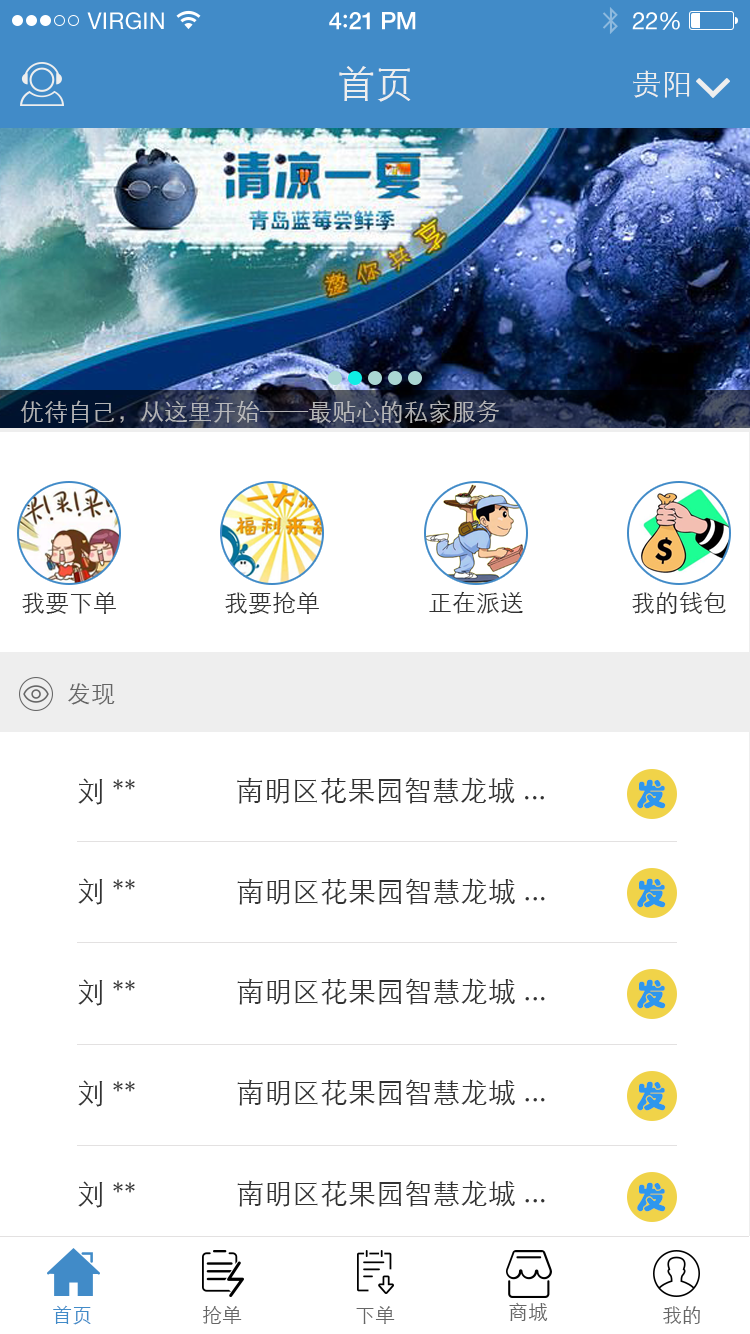
<style>
.page{position:relative;width:750px;height:1334px;background:#ffffff}
.page>*{position:absolute;margin:0}
.t1{font:23px "HelveticaNeue";letter-spacing:0.02em;color:#ffffff}
.t2{font:24px "HelveticaNeue-Medium";letter-spacing:-0.02em;color:#ffffff}
.t3{font:26px "Avenir-Medium";letter-spacing:-0.02em;color:#ffffff}
.t4{font:24px "HelveticaNeue";letter-spacing:-0.02em;color:#ffffff}
.t5{font:38px "STXihei";color:#eeeeee}
.t6{font:30px "STXihei";color:#eeeeee}
.t7{font:24px "STXihei";color:#b4b5b7}
.t8{font:24px "STXihei";color:#333333}
.t9{font:24px "STXihei";color:#666666}
.t10{font:28px "STXihei";color:#333333}
.t11{font:30px "STHupo";color:#2e97ee}
.t12{font:20px "STXihei";color:#666666}
.t13{font:20px "STXihei";color:#418bc8}
</style>
<div class="page">
<p class="t1" style="left:87px;top:12px;width:77px;height:18px">VIRGIN</p>
<p class="t2" style="left:329px;top:12px;width:87px;height:18px">4<span class="t3">:</span>21 PM</p>
<p class="t4" style="left:632px;top:12px;width:48px;height:18px">22%</p>
<p class="t5" style="left:339px;top:66px;width:72px;height:36px">首页</p>
<p class="t6" style="left:633px;top:70px;width:57px;height:28px">贵阳</p>
<p class="t7" style="left:20px;top:400px;width:479px;height:23px">优待自己，从这里开始——最贴心的私家服务</p>
<p class="t8" style="left:22px;top:592px;width:94px;height:22px">我要下单</p>
<p class="t8" style="left:225px;top:592px;width:94px;height:22px">我要抢单</p>
<p class="t8" style="left:429px;top:591px;width:94px;height:23px">正在派送</p>
<p class="t8" style="left:632px;top:591px;width:94px;height:23px">我的钱包</p>
<p class="t9" style="left:68px;top:683px;width:47px;height:22px">发现</p>
<p class="t10" style="left:78px;top:778px;width:57px;height:27px">刘**</p>
<p class="t10" style="left:237px;top:777px;width:307px;height:27px">南明区花果园智慧龙城...</p>
<p class="t11" style="left:637px;top:779px;width:29px;height:30px">发</p>
<p class="t10" style="left:78px;top:878px;width:57px;height:27px">刘**</p>
<p class="t10" style="left:237px;top:878px;width:308px;height:27px">南明区花果园智慧龙城...</p>
<p class="t11" style="left:637px;top:878px;width:29px;height:30px">发</p>
<p class="t10" style="left:78px;top:979px;width:57px;height:27px">刘**</p>
<p class="t10" style="left:237px;top:978px;width:308px;height:27px">南明区花果园智慧龙城...</p>
<p class="t11" style="left:637px;top:979px;width:29px;height:30px">发</p>
<p class="t10" style="left:78px;top:1080px;width:57px;height:27px">刘**</p>
<p class="t10" style="left:237px;top:1079px;width:308px;height:27px">南明区花果园智慧龙城...</p>
<p class="t11" style="left:637px;top:1081px;width:29px;height:30px">发</p>
<p class="t10" style="left:78px;top:1181px;width:57px;height:27px">刘**</p>
<p class="t10" style="left:237px;top:1180px;width:308px;height:27px">南明区花果园智慧龙城...</p>
<p class="t11" style="left:637px;top:1182px;width:29px;height:30px">发</p>
<p class="t12" style="left:509px;top:1302px;width:39px;height:19px">商城</p>
<p class="t13" style="left:53px;top:1305px;width:38px;height:20px">首页</p>
<p class="t12" style="left:203px;top:1306px;width:39px;height:18px">抢单</p>
<p class="t12" style="left:356px;top:1306px;width:39px;height:18px">下单</p>
<p class="t12" style="left:663px;top:1306px;width:37px;height:18px">我的</p>
</div>
